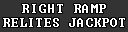
<style>
.page{position:relative;width:128px;height:32px;background:#333333}
.page>*{position:absolute;margin:0}
.t1{font:12px/14px "Terminal";letter-spacing:0.075em;color:#ffffff}
.t2{font:12px/14px "Terminal";letter-spacing:0.1em;color:#ffffff}
</style>
<div class="page">
<p class="t1" style="left:3px;top:4px;width:122px;height:23px;text-align:center"><span class="t2">RIGHT RAMP<br></span>RELITES JACKPOT</p>
</div>
